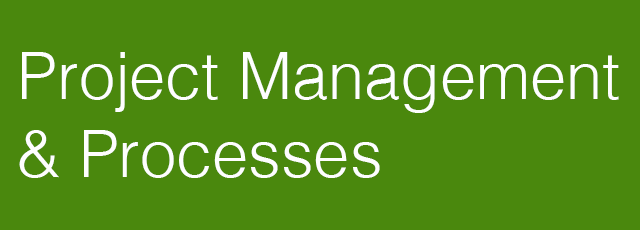
<style>
.page{position:relative;width:640px;height:230px;background:#4a880d}
.page>*{position:absolute;margin:0}
.t1{font:65px "Helvetica-Light";color:#fefefe}
</style>
<div class="page">
<p class="t1" style="left:19px;top:52px;width:600px;height:126px">Project Management<br>&amp; Processes</p>
</div>
